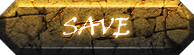
<style>
.page{position:relative;width:194px;height:55px}
.page>*{position:absolute;margin:0}
.t1{font:24px "VinerHandITC";color:#fefefe}
</style>
<div class="page">
<p class="t1" style="left:62px;top:16px;width:68px;height:22px">SAVE</p>
</div>
